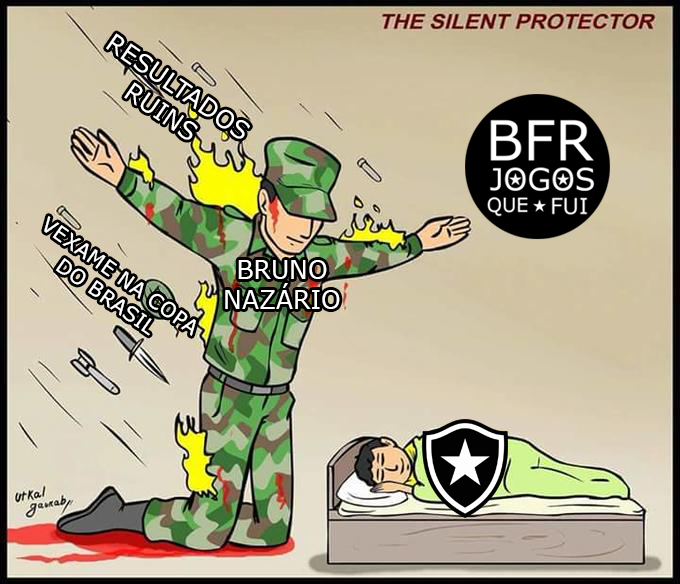
<style>
.page{position:relative;width:680px;height:584px}
.page>*{position:absolute;margin:0}
.t1{font:25px "Verdana";color:#ffffff}
.t2{font:20.6px "Verdana";color:#ffffff}
</style>
<div class="page">
<p class="t1" style="left:106px;top:33px;width:144px;height:107px;rotate:35deg">RESULTADOS RUINS</p>
<p class="t2" style="left:44px;top:216px;width:152px;height:120px;rotate:35deg">VEXAME NA COPA DO BRASIL</p>
<p class="t1" style="left:225px;top:260px;width:115px;height:49px;text-align:center">BRUNO <br>NAZÁRIO</p>
</div>
